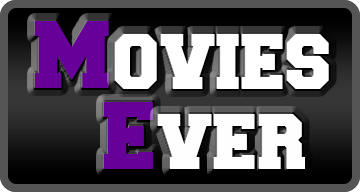
<style>
.page{position:relative;width:360px;height:192px}
.page>*{position:absolute;margin:0}
.t1{font:80px "Freshman";color:#670099}
.t2{font:66px "Freshman";color:#ffffff}
.t3{font:66px "Freshman";color:#fefefe}
</style>
<div class="page">
<p class="t1" style="left:34px;top:21px;width:75px;height:67px">M</p>
<p class="t2" style="left:114px;top:34px;width:215px;height:55px">OVIES</p>
<p class="t1" style="left:103px;top:102px;width:50px;height:67px">E</p>
<p class="t3" style="left:157px;top:114px;width:148px;height:55px">VER</p>
</div>
